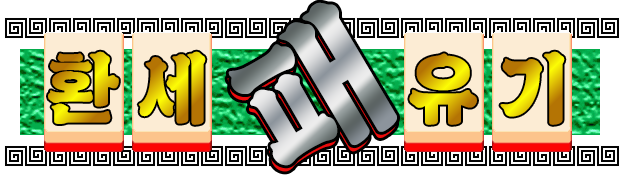
<style>
.page{position:relative;width:632px;height:184px;background:#ffffff}
.page>*{position:absolute;margin:0}
.t1{font:77.5px "Miwon";letter-spacing:-0.025em}
</style>
<div class="page">
<p class="t1" style="left:48px;top:51px;width:71px;height:73px">환</p>
<p class="t1" style="left:138px;top:51px;width:68px;height:74px">세</p>
<p class="t1" style="left:409px;top:53px;width:68px;height:72px">유</p>
<p class="t1" style="left:500px;top:51px;width:65px;height:74px">기</p>
</div>
